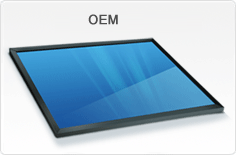
<style>
.page{position:relative;width:236px;height:155px}
.page>*{position:absolute;margin:0}
.t1{font:13px "ArialMT";color:#4e4e4e;font-weight:bold}
</style>
<div class="page">
<p class="t1" style="left:88px;top:14px;width:30px;height:11px">OEM</p>
</div>
